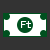
<style>
.page{position:relative;width:50px;height:50px;background:#333333}
.page>*{position:absolute;margin:0}
.t1{font:10.4px "ArialMT";color:#ffffff}
</style>
<div class="page">
<p class="t1" style="left:21px;top:21px;width:9px;height:7px;opacity:0.2">Ft</p>
</div>
